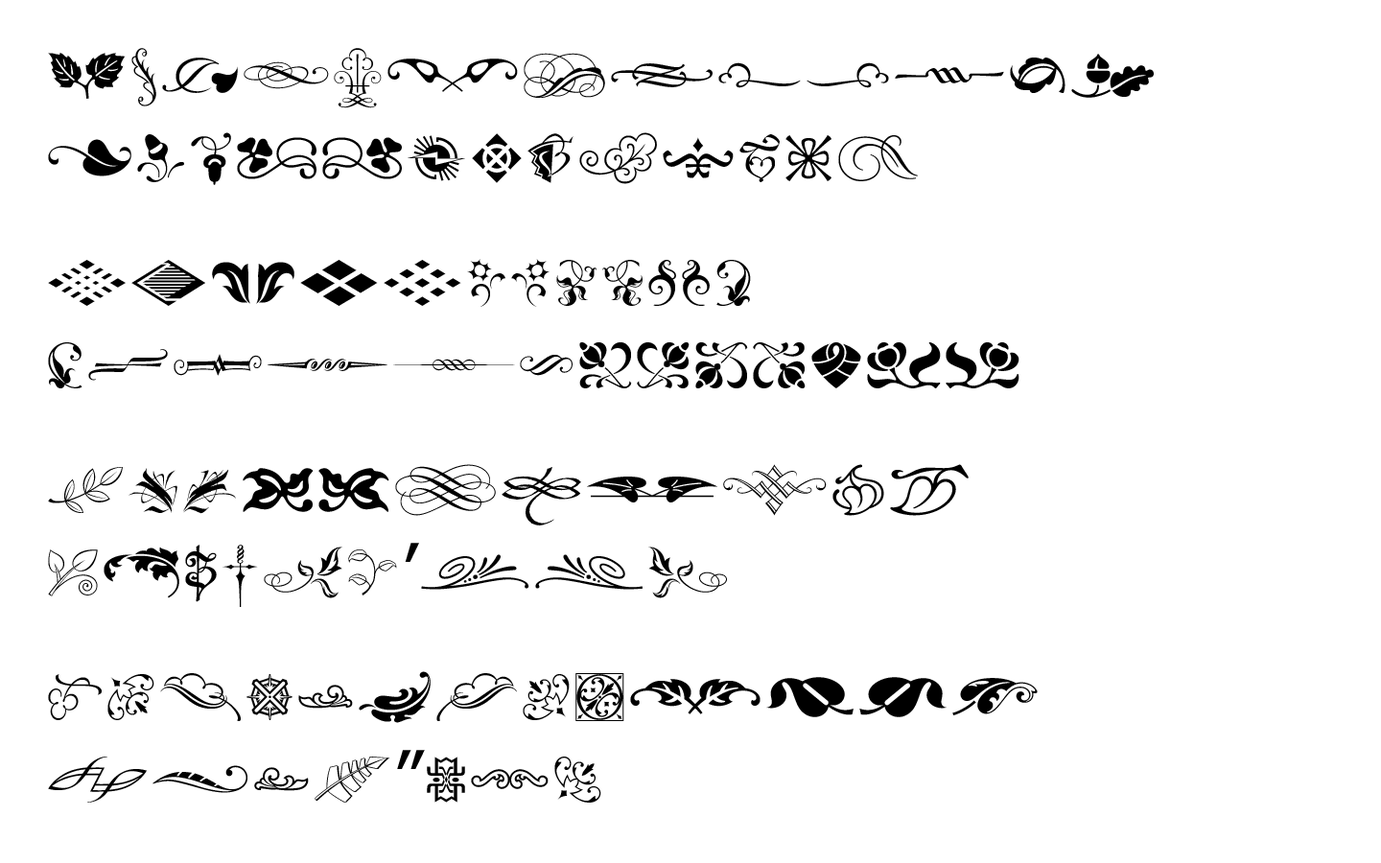
<style>
.page{position:relative;width:1381px;height:863px;background:#ffffff}
.page>*{position:absolute;margin:0}
.t1{font:69.1px "TypeEmbellishmentsOneLetPlain";color:#000000}
.t2{font:69.1px "Verdana";color:#000000}
</style>
<div class="page">
<p class="t1" style="left:48px;top:48px;width:1106px;height:755px">abcdefghijklm<br>nopqrstuvwxyz<br> <br>ABCDEFGHIJKLM<br>NOPQRSTUVWXYZ<br> <br>`1234567890<br>-=[]\;<span class="t2">’</span>,./<br> <br>~!@#$%^&amp;*()_+<br>{}|:<span class="t2">”</span>&lt;&gt;?</p>
</div>
